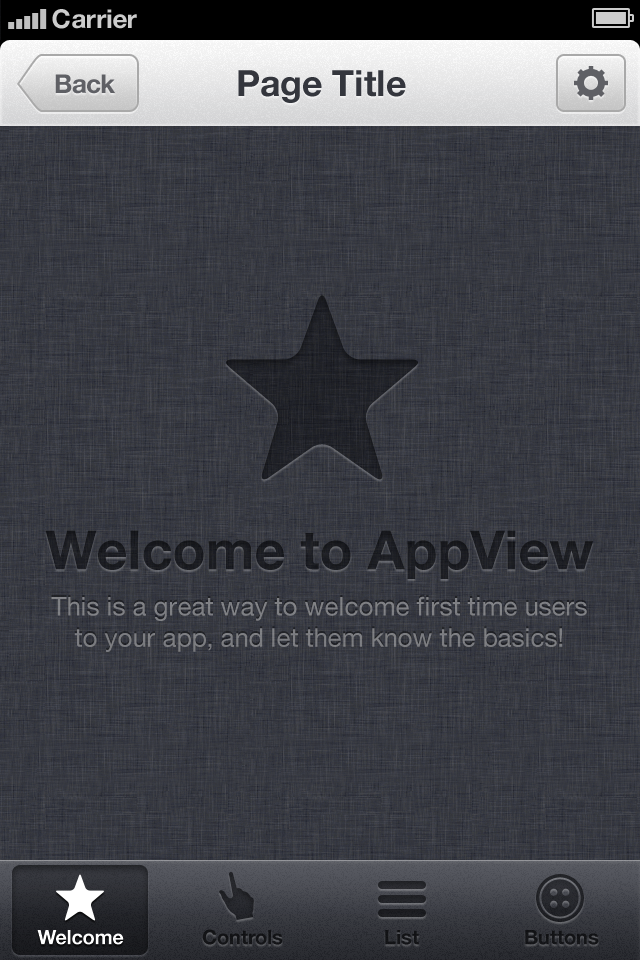
<style>
.page{position:relative;width:640px;height:960px}
.page>*{position:absolute;margin:0}
.t1{font:26px "HelveticaNeue-Bold";color:#cccccc}
.t2{font:26px "HelveticaNeue-Bold";color:#5f6065}
.t3{font:36px "HelveticaNeue-Bold";color:#34363d}
.t4{font:54px "HelveticaNeue-Bold";color:#1b1d22}
.t5{font:26px "HelveticaNeue";color:#7e7f83}
.t6{font:20px "HelveticaNeue-Bold";color:#000000}
.t7{font:20px "HelveticaNeue-Bold";color:#ffffff}
</style>
<div class="page">
<p class="t1" style="left:52px;top:9px;width:85px;height:20px">Carrier</p>
<p class="t2" style="left:55px;top:74px;width:60px;height:20px">Back</p>
<p class="t3" style="left:238px;top:70px;width:168px;height:33px">Page Title</p>
<p class="t4" style="left:45px;top:530px;width:549px;height:49px">Welcome to AppView</p>
<p class="t5" style="left:51px;top:596px;width:536px;height:56px;text-align:center">This is a great way to welcome first time users to your app, and let them know the basics!</p>
<p class="t6" style="left:202px;top:929px;width:81px;height:16px">Controls</p>
<p class="t7" style="left:37px;top:930px;width:87px;height:15px">Welcome</p>
<p class="t6" style="left:385px;top:930px;width:34px;height:15px">List</p>
<p class="t6" style="left:525px;top:930px;width:74px;height:15px">Buttons</p>
</div>
